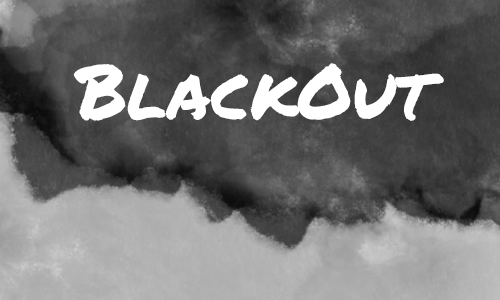
<style>
.page{position:relative;width:500px;height:300px}
.page>*{position:absolute;margin:0}
.t1{font:75px "PermanentMarker-Regular";color:#ffffff}
</style>
<div class="page">
<p class="t1" style="left:73px;top:63px;width:371px;height:58px">BlackOut</p>
</div>
